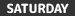
<style>
.page{position:relative;width:75px;height:16px;background:#333333}
.page>*{position:absolute;margin:0}
.t1{font:12.5px "RoundedMplus1c-ExtraBold";color:#ffffff}
</style>
<div class="page">
<p class="t1" style="left:7px;top:3px;width:62px;height:11px">SATURDAY</p>
</div>
